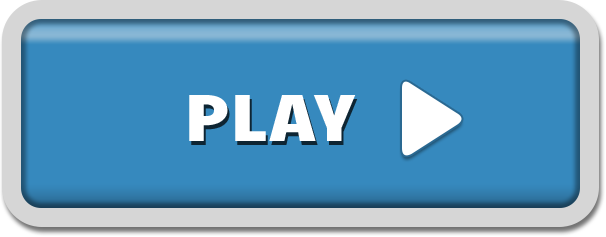
<style>
.page{position:relative;width:606px;height:237px;background:#3689be}
.page>*{position:absolute;margin:0}
.t1{font:66.7px "PaytoneOne";letter-spacing:0.03em;color:#ffffff}
</style>
<div class="page">
<p class="t1" style="left:189px;top:95px;width:167px;height:46px">PLAY</p>
</div>
